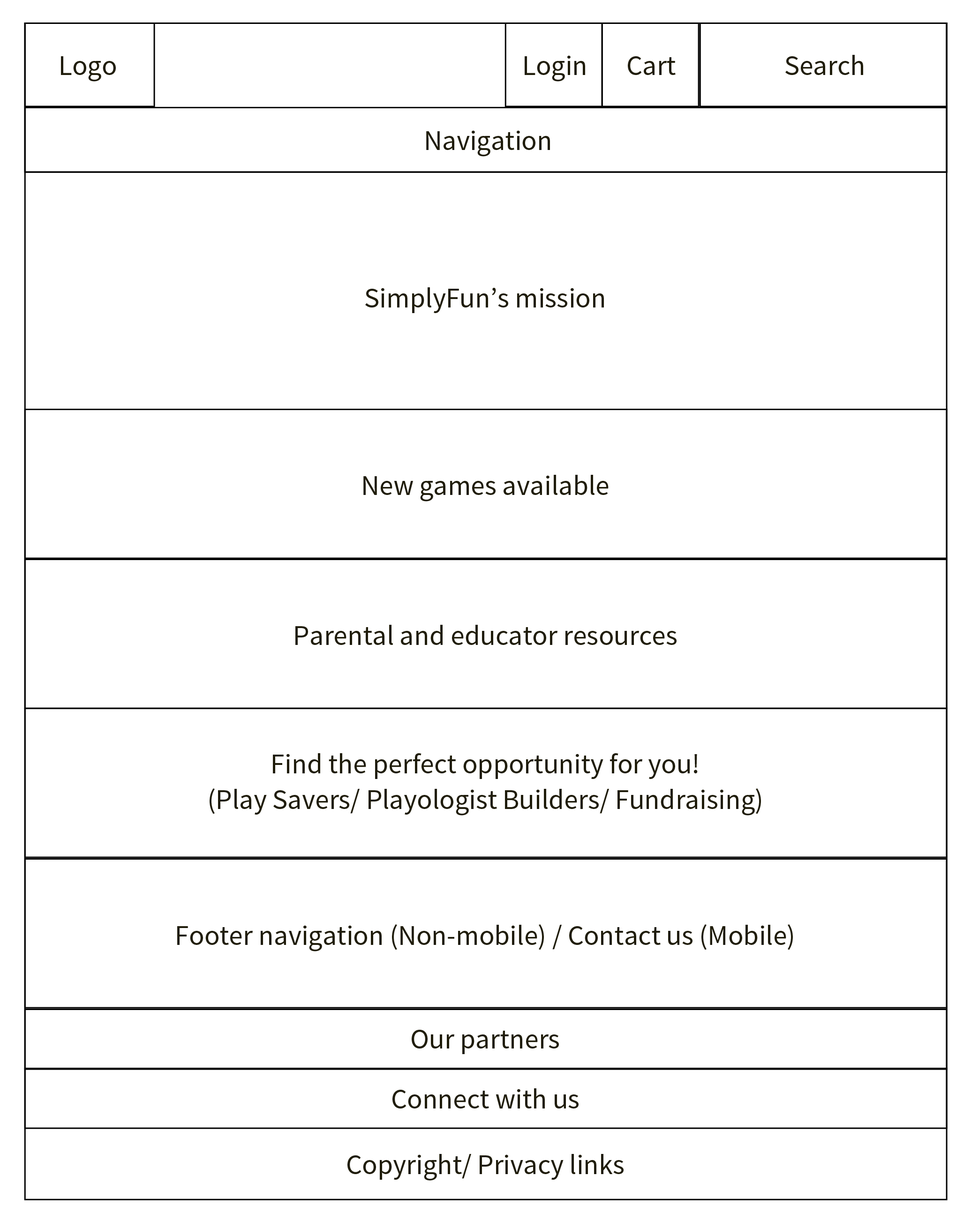
<style>
.page{position:relative;width:971px;height:1228px;background:#ffffff}
.page>*{position:absolute;margin:0}
.t1{font:28.1px "SourceSansPro-Regular";color:#201d0b}
.t2{font:28.1px/35.7px "SourceSansPro-Regular";color:#201d0b}
</style>
<div class="page">
<p class="t1" style="left:61px;top:56px;width:55px;height:26px">Logo</p>
<p class="t1" style="left:525px;top:55px;width:60px;height:27px">Login</p>
<p class="t1" style="left:628px;top:56px;width:48px;height:19px">Cart</p>
<p class="t1" style="left:785px;top:55px;width:78px;height:20px">Search</p>
<p class="t1" style="left:426px;top:130px;width:124px;height:27px">Navigation</p>
<p class="t1" style="left:365px;top:287px;width:239px;height:26px">SimplyFun’s mission</p>
<p class="t1" style="left:363px;top:475px;width:245px;height:27px">New games available</p>
<p class="t1" style="left:295px;top:625px;width:381px;height:20px">Parental and educator resources</p>
<p class="t2" style="left:210px;top:753px;width:551px;height:63px;text-align:center">Find the perfect opportunity for you!<br>(Play Savers/ Playologist Builders/ Fundraising)</p>
<p class="t1" style="left:177px;top:924px;width:616px;height:28px">Footer navigation (Non-mobile) / Contact us (Mobile)</p>
<p class="t1" style="left:412px;top:1030px;width:147px;height:24px">Our partners</p>
<p class="t1" style="left:392px;top:1089px;width:186px;height:20px">Connect with us</p>
<p class="t1" style="left:347px;top:1154px;width:276px;height:27px">Copyright/ Privacy links</p>
</div>
